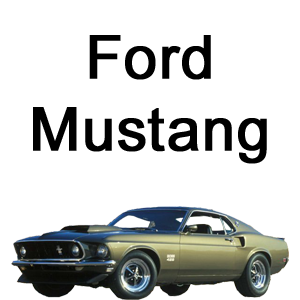
<style>
.page{position:relative;width:300px;height:300px;background:#ffffff}
.page>*{position:absolute;margin:0}
.t1{font:60px "ArialMT";color:#000000;font-weight:bold}
</style>
<div class="page">
<p class="t1" style="left:33px;top:35px;width:234px;height:129px;text-align:center">Ford<br>Mustang</p>
</div>
